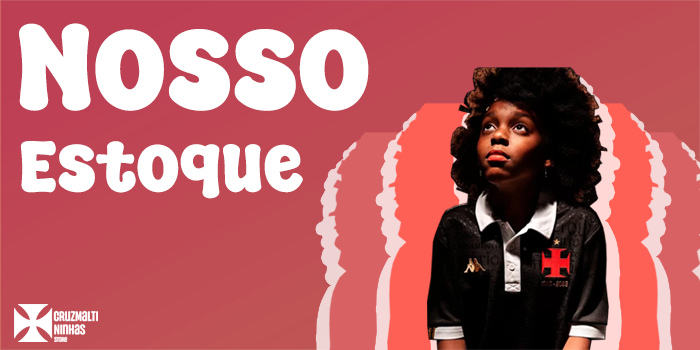
<style>
.page{position:relative;width:700px;height:350px}
.page>*{position:absolute;margin:0}
.t1{font:124.3px "SuperCreamy";color:#ffffff}
.t2{font:73.3px "SuperCreamy";color:#ffffff}
</style>
<div class="page">
<p class="t1" style="left:19px;top:23px;width:350px;height:88px">Nosso</p>
<p class="t2" style="left:20px;top:141px;width:283px;height:58px">Estoque</p>
</div>
